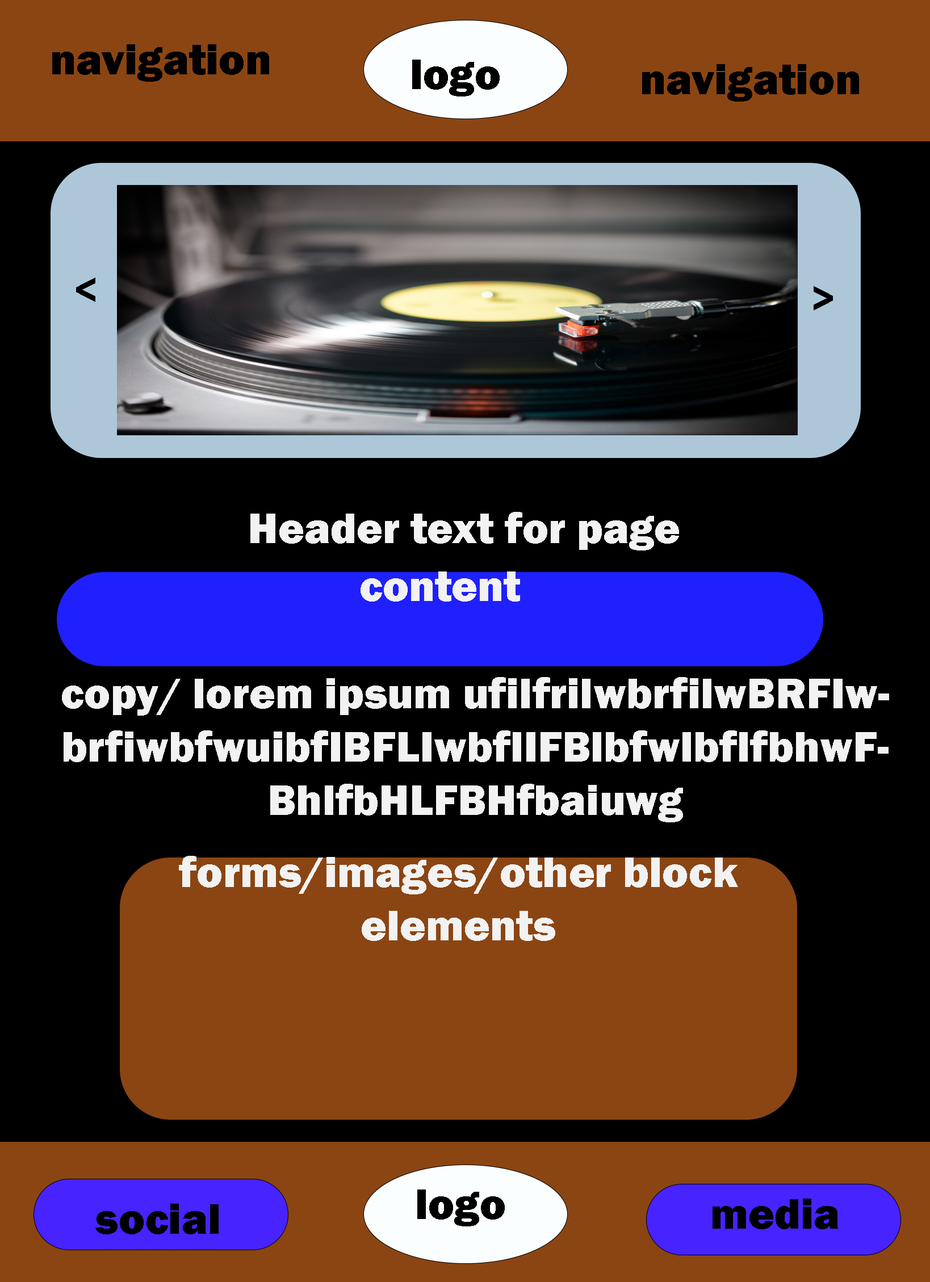
<style>
.page{position:relative;width:930px;height:1282px;background:#000000}
.page>*{position:absolute;margin:0}
.t1{font:44.5px "FranklinGothic-Heavy";color:#000000}
.t2{font:44.5px "FranklinGothic-Heavy";color:#f2f2f2}
</style>
<div class="page">
<p class="t1" style="left:52px;top:44px;width:217px;height:38px">navigation</p>
<p class="t1" style="left:412px;top:60px;width:88px;height:37px">logo</p>
<p class="t1" style="left:642px;top:64px;width:217px;height:38px">navigation</p>
<p class="t1" style="left:76px;top:278px;width:19px;height:24px">&lt;</p>
<p class="t1" style="left:813px;top:286px;width:20px;height:25px">&gt;</p>
<p class="t2" style="left:250px;top:512px;width:429px;height:39px">Header text for page</p>
<p class="t2" style="left:360px;top:572px;width:160px;height:30px">content</p>
<p class="t2" style="left:62px;top:677px;width:827px;height:146px;text-align:center">copy/ lorem ipsum ufilfrilwbrfilwBRFIwbrfiwbfwuibfIBFLIwbflIFBlbfwlbflfbhwFBhlfbHLFBHfbaiuwg</p>
<p class="t2" style="left:179px;top:856px;width:559px;height:85px;text-align:center">forms/images/other block elements</p>
<p class="t1" style="left:417px;top:1190px;width:88px;height:37px">logo</p>
<p class="t1" style="left:95px;top:1204px;width:124px;height:31px">social</p>
<p class="t1" style="left:712px;top:1199px;width:126px;height:31px">media</p>
</div>
